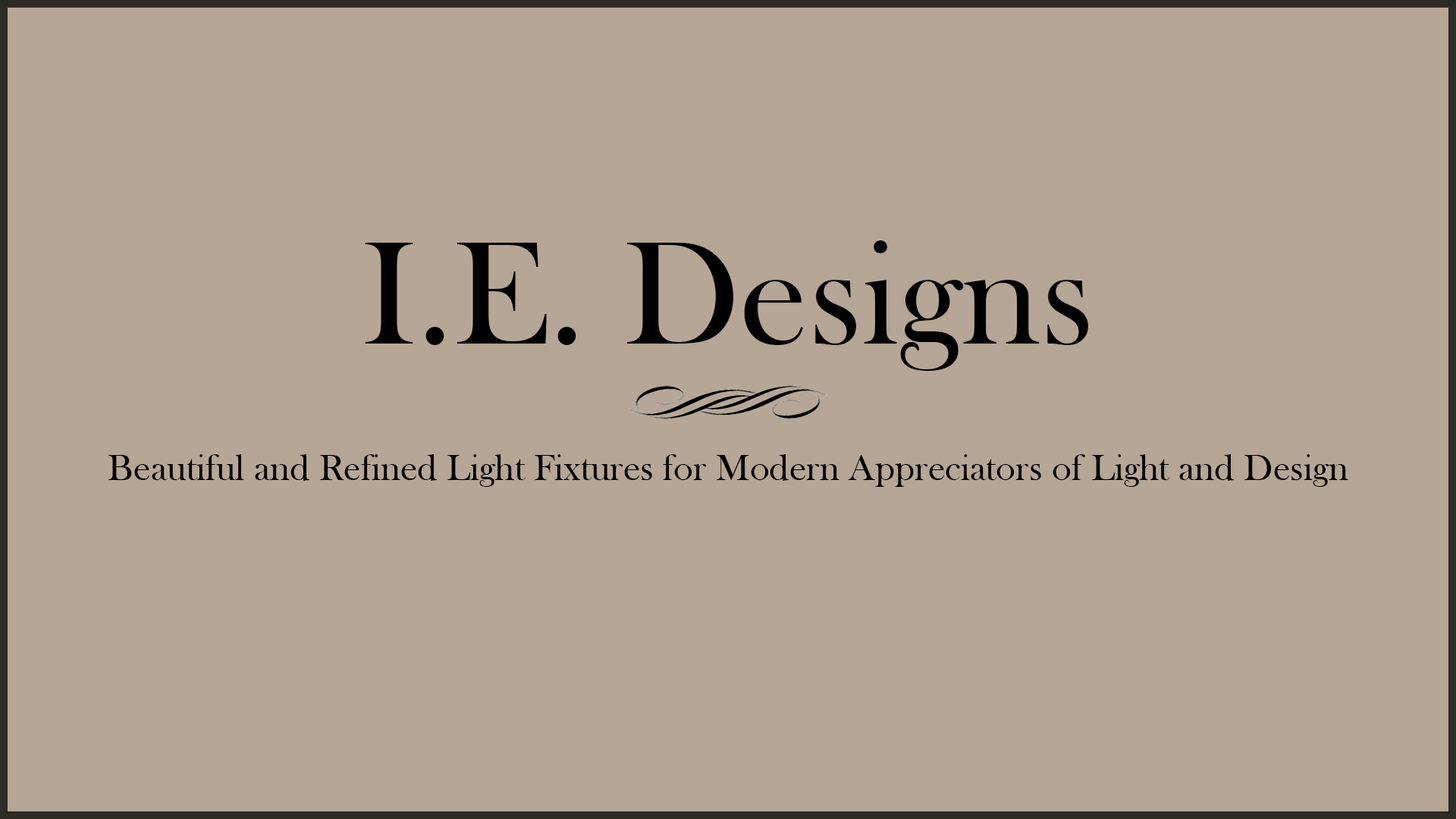
<style>
.page{position:relative;width:1456px;height:819px;background:#b6a696}
.page>*{position:absolute;margin:0}
.t1{font:37.9px "BaskOldFace";color:#000000}
.t2{font:151.7px "BaskOldFace";color:#000000}
</style>
<div class="page">
<p class="t1" style="left:108px;top:240px;width:1240px;height:247px;text-align:center"><span class="t2">I.E. Designs<br></span><br><br>Beautiful and Refined Light Fixtures for Modern Appreciators of Light and Design</p>
</div>
